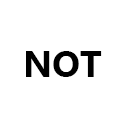
<style>
.page{position:relative;width:128px;height:128px;background:#ffffff}
.page>*{position:absolute;margin:0}
.t1{font:36.9px "Gadugi-Bold";color:#000000}
</style>
<div class="page">
<p class="t1" style="left:26px;top:51px;width:76px;height:26px">NOT</p>
</div>
